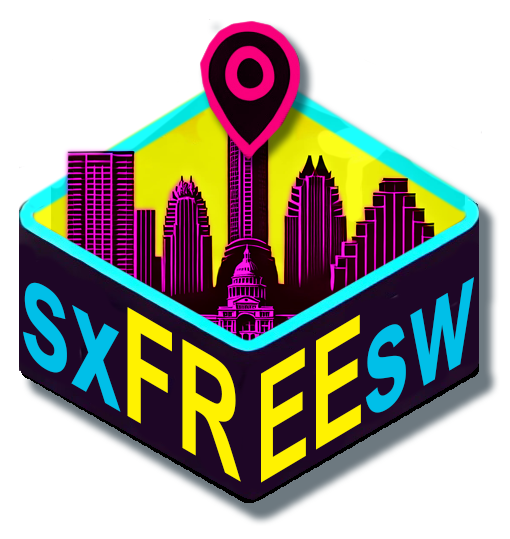
<style>
.page{position:relative;width:510px;height:539px;background:#ffffff}
.page>*{position:absolute;margin:0}
.t1{font:151.7px "ArialNarrow-Bold";color:#fff200;scale:0.77 1}
.t2{font:151.7px "ArialNarrow-Bold";color:#00bfe8;scale:0.77 1}
.t3{font:151.7px "ArialNarrow-Bold";color:#00bfe8;scale:0.84 1}
.t4{font:151.7px "ArialNarrow-Bold";color:#fff200;scale:0.84 1}
</style>
<div class="page">
<p class="t1" style="left:261px;top:277px;width:213px;height:206px;rotate:-31deg">EE<span class="t2">sw</span></p>
<p class="t3" style="left:23px;top:282px;width:218px;height:200px;rotate:30deg">sx<span class="t4">FR</span></p>
</div>
